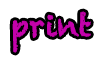
<style>
.page{position:relative;width:100px;height:60px;background:#ffffff}
.page>*{position:absolute;margin:0}
.t1{font:30px "Chalkduster";color:#c402ab}
</style>
<div class="page">
<p class="t1" style="left:12px;top:11px;width:79px;height:42px">print</p>
</div>
